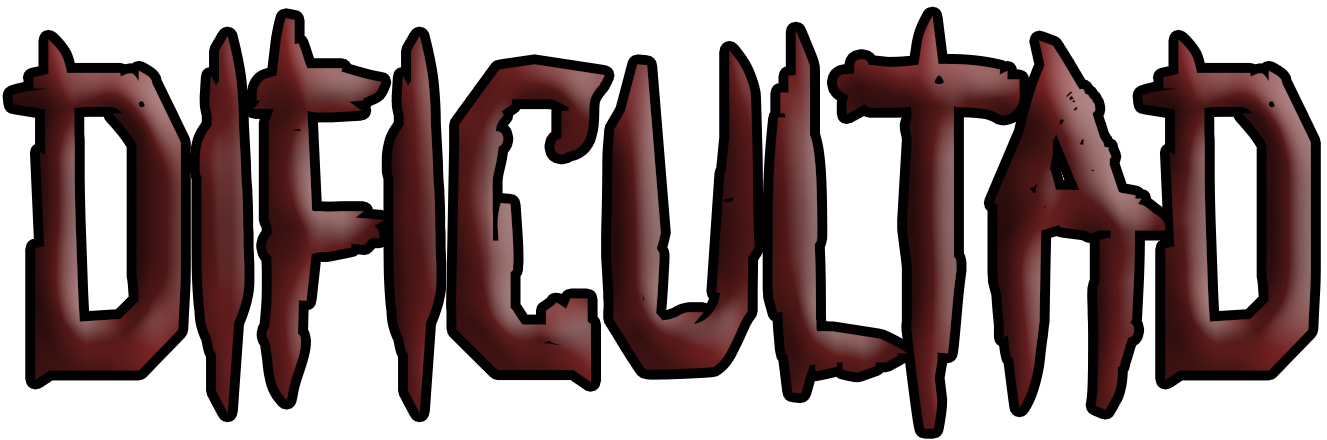
<style>
.page{position:relative;width:1327px;height:440px;background:#ffffff}
.page>*{position:absolute;margin:0}
.t1{font:428.4px "HorroroidBold"}
</style>
<div class="page">
<p class="t1" style="left:12px;top:16px;width:1299px;height:413px">DIFICULTAD</p>
</div>
